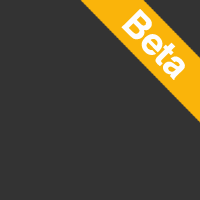
<style>
.page{position:relative;width:200px;height:200px;background:#333333}
.page>*{position:absolute;margin:0}
.t1{font:36px "Helvetica-Bold";color:#fdfdfd}
</style>
<div class="page">
<p class="t1" style="left:121px;top:9px;width:64px;height:71px;rotate:45deg">Beta</p>
</div>
